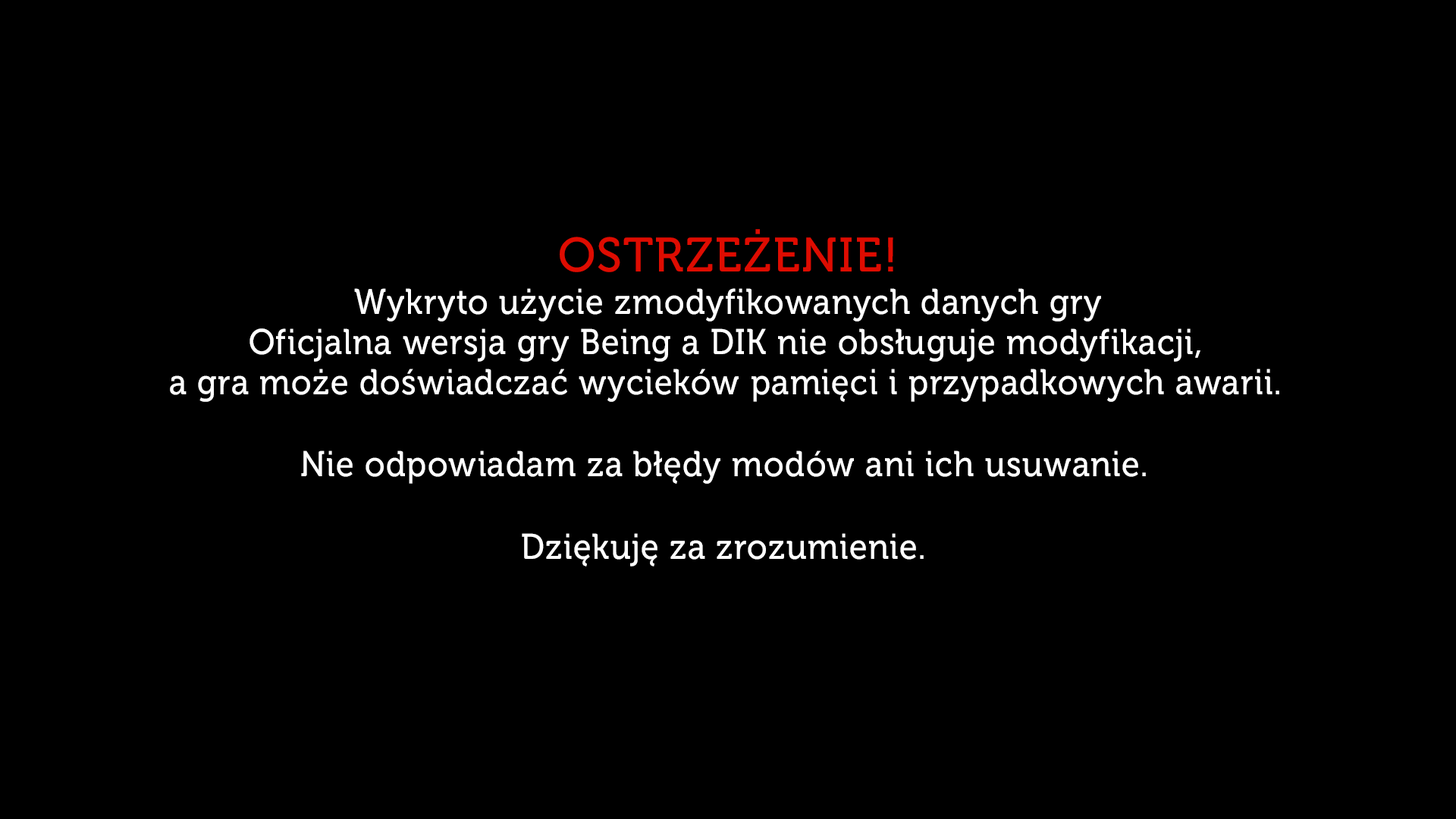
<style>
.page{position:relative;width:1456px;height:819px;background:#000000}
.page>*{position:absolute;margin:0}
.t1{font:47.9px "MuseoCyrl-500";letter-spacing:0.035em;color:#de0c01;font-variant:small-caps}
.t2{font:35.6px "MuseoCyrl-500";letter-spacing:0.035em;color:#ffffff;scale:0.92 1}
</style>
<div class="page">
<p class="t1" style="left:560px;top:229px;width:333px;height:43px">OSTRZEŻENIE!</p>
<p class="t2" style="left:354px;top:288px;width:747px;height:34px">Wykryto użycie zmodyfikowanych danych gry</p>
<p class="t2" style="left:249px;top:328px;width:951px;height:34px">Oficjalna wersja gry Being a DIK nie obsługuje modyfikacji,</p>
<p class="t2" style="left:170px;top:369px;width:1109px;height:33px">a gra może doświadczać wycieków pamięci i przypadkowych awarii.</p>
<p class="t2" style="left:301px;top:450px;width:845px;height:34px">Nie odpowiadam za błędy modów ani ich usuwanie.</p>
<p class="t2" style="left:522px;top:533px;width:402px;height:33px">Dziękuję za zrozumienie.</p>
</div>
